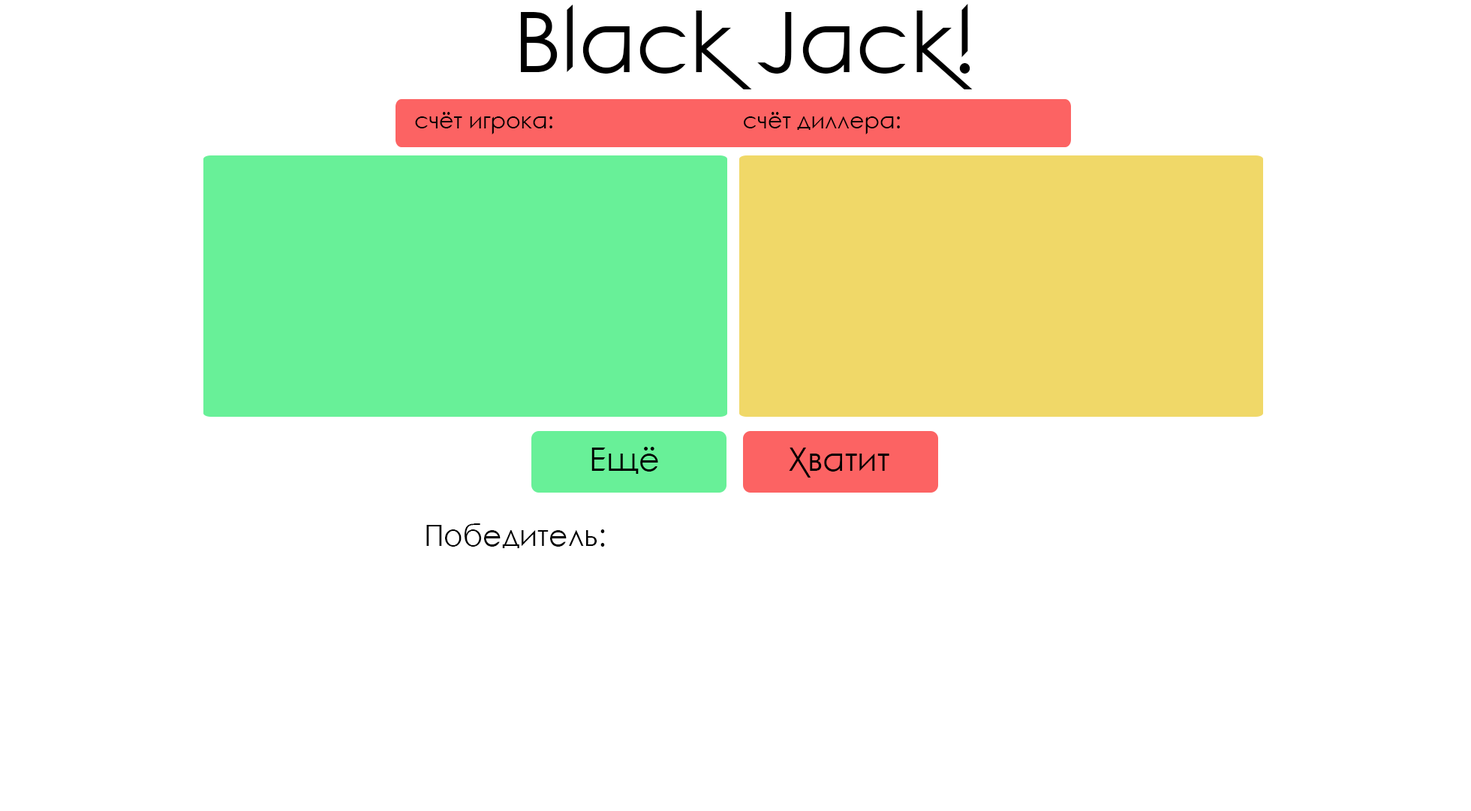
<style>
.page{position:relative;width:1471px;height:811px;background:#ffffff}
.page>*{position:absolute;margin:0}
.t1{font:84px "RezaZulmiSans";color:#000000}
.t2{font:22.5px "RezaZulmiSans";color:#000000}
.t3{font:32.3px "RezaZulmiSans";color:#000000}
.t4{font:29.4px "RezaZulmiSans";color:#000000}
</style>
<div class="page">
<p class="t1" style="left:521px;top:4px;width:452px;height:85px">Black Jack!</p>
<p class="t2" style="left:415px;top:112px;width:137px;height:22px">счёт игрока:</p>
<p class="t2" style="left:744px;top:112px;width:156px;height:22px">счёт диллера:</p>
<p class="t3" style="left:591px;top:447px;width:67px;height:27px">Ещё</p>
<p class="t3" style="left:789px;top:447px;width:100px;height:30px">Хватит</p>
<p class="t4" style="left:426px;top:523px;width:179px;height:25px">Победитель:</p>
</div>
